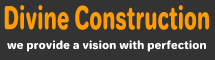
<style>
.page{position:relative;width:215px;height:60px;background:#333333}
.page>*{position:absolute;margin:0}
.t1{font:31px "Jellee-Roman";color:#ff9d00;scale:0.65 1}
.t2{font:11px "Jellee-Roman";color:#ffffff}
</style>
<div class="page">
<p class="t1" style="left:4px;top:5px;width:205px;height:25px">Divine Construction</p>
<p class="t2" style="left:7px;top:40px;width:200px;height:12px">we provide a vision with perfection</p>
</div>
